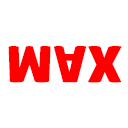
<style>
.page{position:relative;width:128px;height:128px;background:#ffffff}
.page>*{position:absolute;margin:0}
.t1{font:52px "LilitaOne";color:#ff0000}
</style>
<div class="page">
<p class="t1" style="left:8px;top:46px;width:114px;height:37px">MAX</p>
</div>
